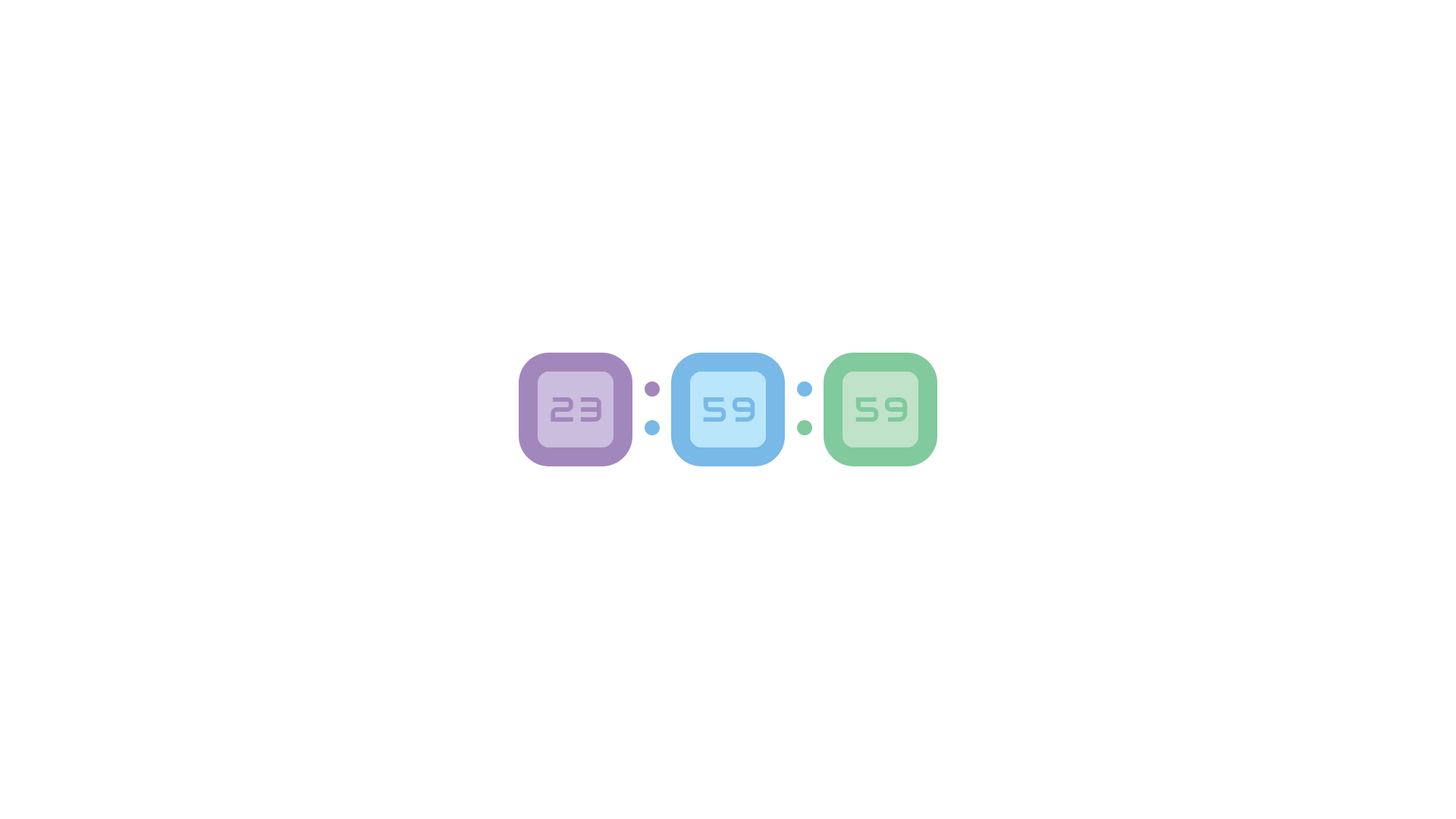
<style>
.page{position:relative;width:1456px;height:819px;background:#ffffff}
.page>*{position:absolute;margin:0}
.t1{font:34.8px "Audiowide-Regular";letter-spacing:0.1em;color:#a287bc;text-transform:uppercase}
.t2{font:34.8px "Audiowide-Regular";letter-spacing:0.1em;color:#78b9e8;text-transform:uppercase}
.t3{font:34.8px "Audiowide-Regular";letter-spacing:0.1em;color:#80ca9d;text-transform:uppercase}
</style>
<div class="page">
<p class="t1" style="left:551px;top:397px;width:50px;height:25px">23</p>
<p class="t2" style="left:703px;top:397px;width:52px;height:25px">59</p>
<p class="t3" style="left:855px;top:397px;width:53px;height:25px">59</p>
</div>
